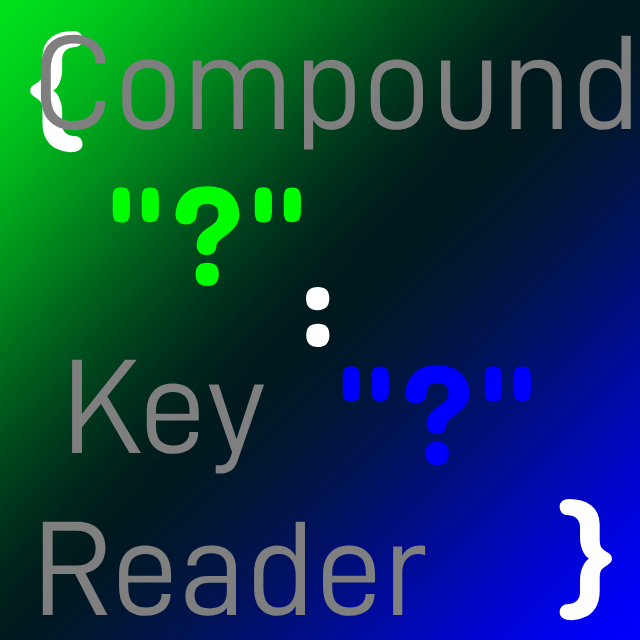
<style>
.page{position:relative;width:640px;height:640px}
.page>*{position:absolute;margin:0}
.t1{font:144px "Dangrek-Regular"}
.t2{font:135px "D-DIN";color:#7f7f7f}
.t3{font:144px "Dangrek-Regular";color:#00ff00}
.t4{font:144px "Dangrek-Regular";color:#ffffff}
.t5{font:144px "Dangrek-Regular";color:#0000ff}
</style>
<div class="page">
<p class="t1" style="left:30px;top:30px;width:53px;height:123px">{</p>
<p class="t2" style="left:40px;top:34px;width:591px;height:582px">Compound<br><br> Key <br>Reader</p>
<p class="t3" style="left:112px;top:186px;width:189px;height:101px">"?"</p>
<p class="t4" style="left:306px;top:286px;width:24px;height:61px">:</p>
<p class="t5" style="left:342px;top:365px;width:189px;height:100px">"?"</p>
<p class="t4" style="left:559px;top:498px;width:53px;height:123px">}</p>
</div>
